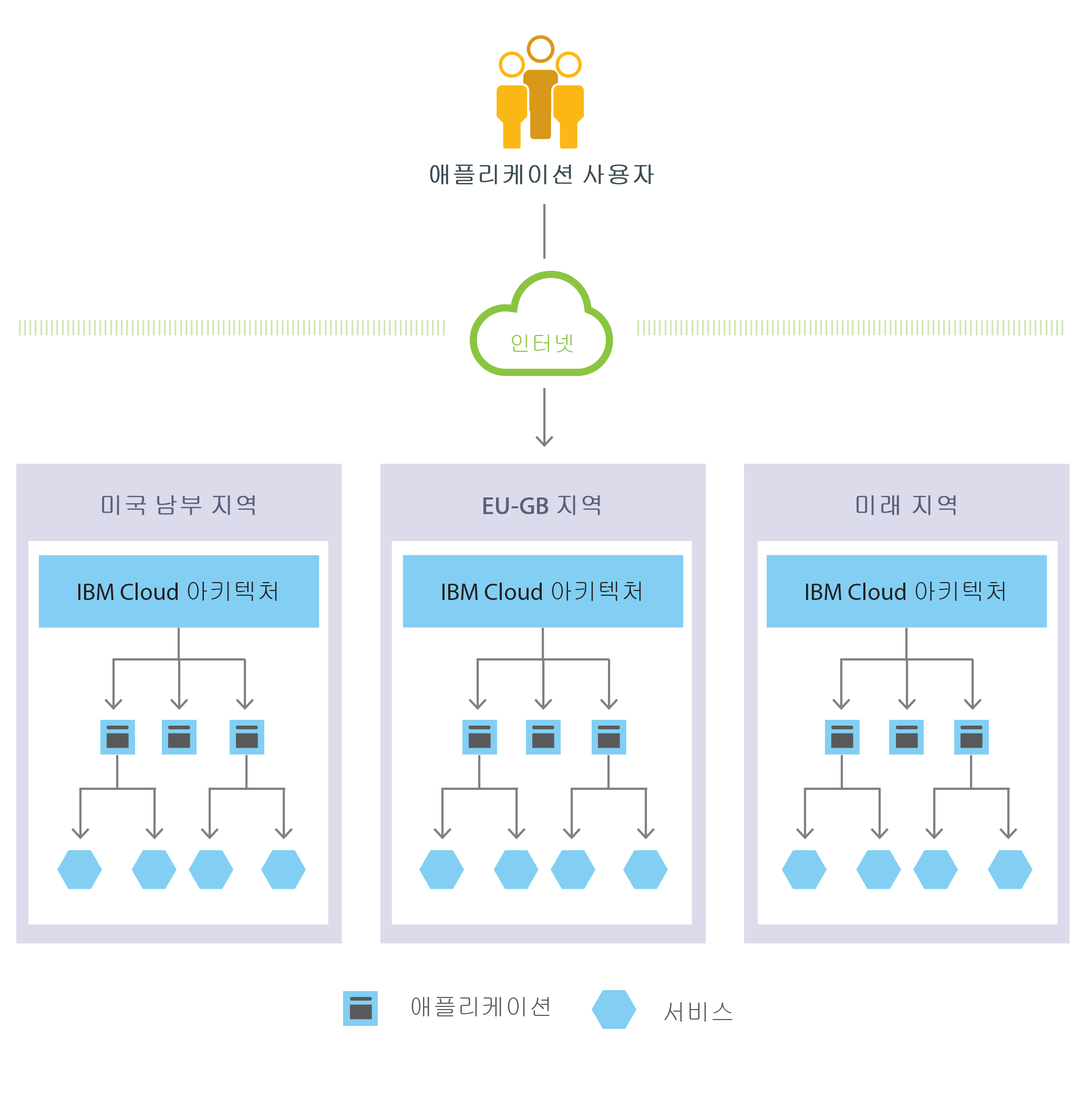
<style>
.page{position:relative;width:1084px;height:1100px;background:#ffffff}
.page>*{position:absolute;margin:0}
.t1{font:24.1px "Gulim";color:#3b4b54;font-weight:bold}
.t2{font:21.9px "Gulim";color:#8ac540}
.t3{font:24.1px "Gulim";color:#58607a;font-weight:bold}
.t4{font:24.1px "MyriadPro-Regular";color:#58607a;font-weight:bold}
.t5{font:24.1px "MyriadPro-Regular";color:#231f20}
.t6{font:24.1px "Gulim";color:#231f20}
.t7{font:24.1px "Gulim";color:#59595c}
</style>
<div class="page">
<p class="t1" style="left:430px;top:165px;width:224px;height:19px">애플리케이션 사용자</p>
<p class="t2" style="left:512px;top:334px;width:61px;height:18px">인터넷</p>
<p class="t3" style="left:102px;top:495px;width:153px;height:20px">미국 남부 지역</p>
<p class="t4" style="left:484px;top:495px;width:116px;height:20px">EU-GB <span class="t3">지역</span></p>
<p class="t3" style="left:857px;top:495px;width:99px;height:20px">미래 지역</p>
<p class="t5" style="left:78px;top:581px;width:199px;height:20px">IBM Cloud <span class="t6">아키텍처</span></p>
<p class="t5" style="left:443px;top:581px;width:198px;height:20px">IBM Cloud <span class="t6">아키텍처</span></p>
<p class="t5" style="left:806px;top:581px;width:199px;height:20px">IBM Cloud <span class="t6">아키텍처</span></p>
<p class="t7" style="left:412px;top:997px;width:138px;height:19px">애플리케이션</p>
<p class="t7" style="left:664px;top:1002px;width:69px;height:19px">서비스</p>
</div>
